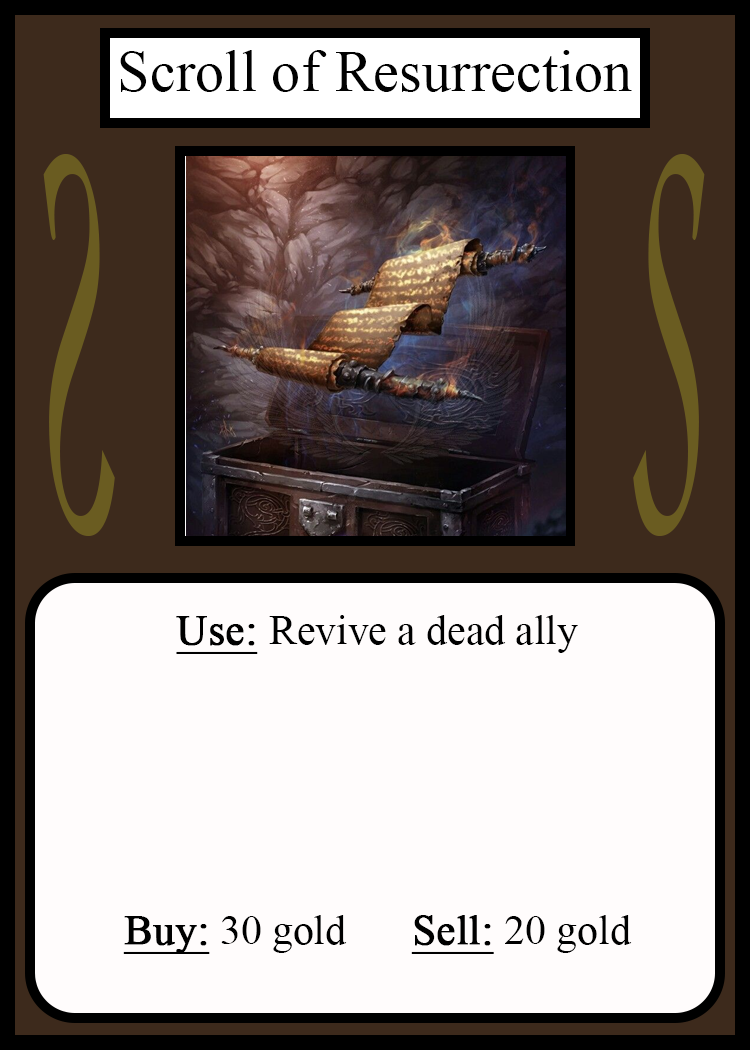
<style>
.page{position:relative;width:750px;height:1050px;background:#fffcfc}
.page>*{position:absolute;margin:0}
.t1{font:58.3px "TimesNewRomanPSMT";color:#010101}
.t2{font:548.5px "Apple-Chancery";color:#6a5c21;scale:0.27 1}
.t3{font:548.2px "Apple-Chancery";color:#6a5c21;scale:0.27 1}
.t4{font:41.7px "TimesNewRomanPSMT";color:#000000}
.t5{font:41.7px "TimesNewRomanPSMT";color:#000000;font-weight:bold;text-decoration:underline}
</style>
<div class="page">
<p class="t1" style="left:120px;top:50px;width:512px;height:42px">Scroll of Resurrection</p>
<p class="t2" style="left:43px;top:154px;width:72px;height:382px;rotate:180deg">S</p>
<p class="t3" style="left:633px;top:154px;width:72px;height:382px">S</p>
<p class="t4" style="left:123px;top:615px;width:509px;height:339px;text-align:center"><span class="t5">Use: </span>Revive a dead ally<br><br><br><br><br><br><span class="t5">Buy:</span> 30 gold   <span class="t5">Sell:</span> 20 gold</p>
</div>
